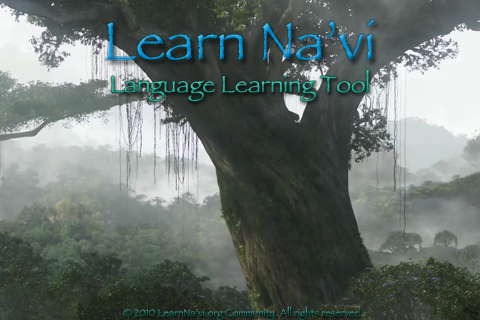
<style>
.page{position:relative;width:480px;height:320px}
.page>*{position:absolute;margin:0}
.t1{font:55px "Papyrus"}
.t2{font:24px "Papyrus"}
.t3{font:10px "Papyrus"}
</style>
<div class="page">
<p class="t1" style="left:106px;top:20px;width:268px;height:41px">Learn Na’vi</p>
<p class="t2" style="left:111px;top:69px;width:258px;height:33px">Language Learning Tool</p>
<p class="t3" style="left:123px;top:306px;width:240px;height:15px">© 2010 LearnNa’vi.org Community. All rights reserved.</p>
</div>
